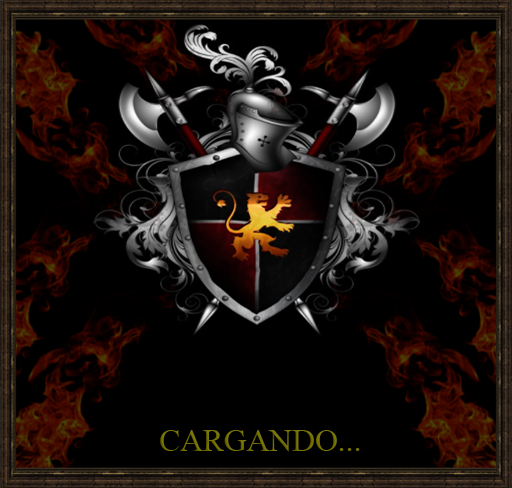
<style>
.page{position:relative;width:512px;height:488px;background:#000000}
.page>*{position:absolute;margin:0}
.t1{font:32px "TimesNewRomanPSMT";color:#787300}
</style>
<div class="page">
<p class="t1" style="left:160px;top:430px;width:200px;height:22px">CARGANDO...</p>
</div>
